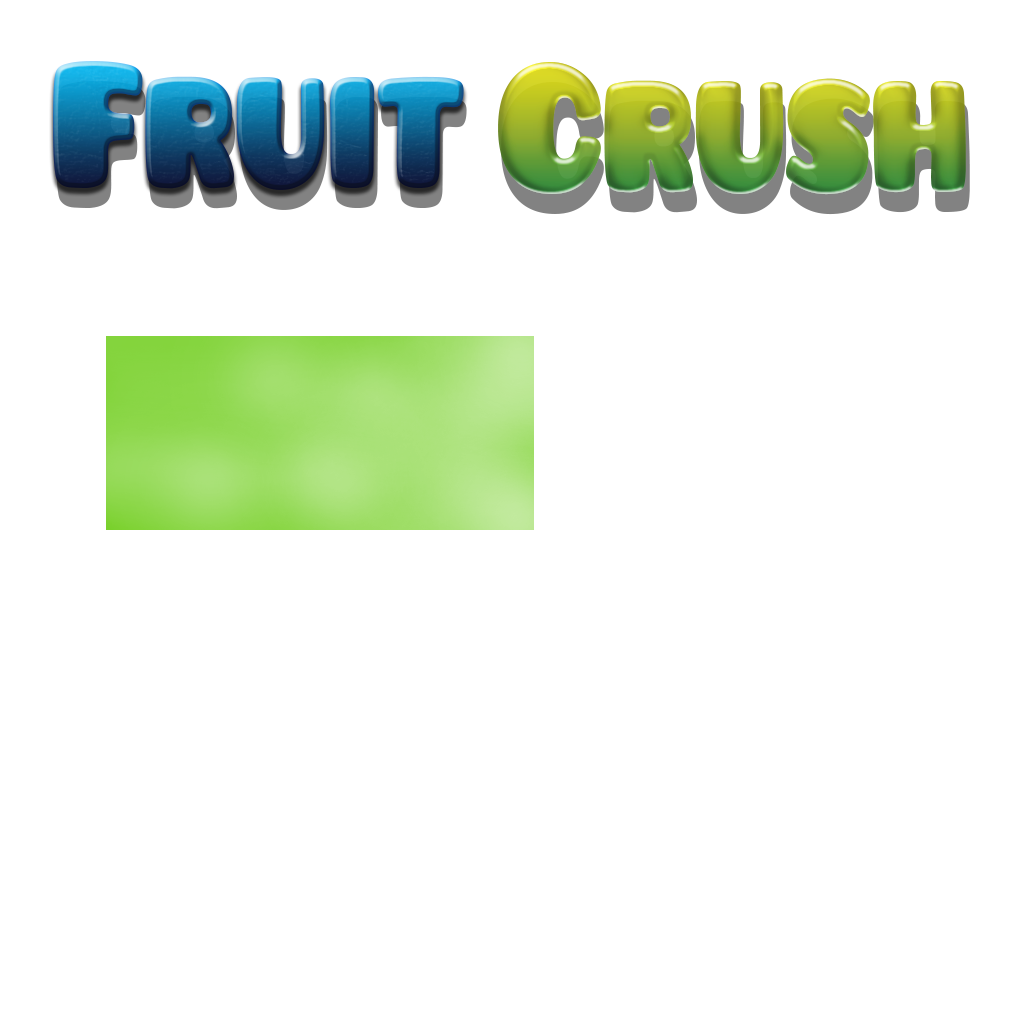
<style>
.page{position:relative;width:1024px;height:1024px;background:#ffffff}
.page>*{position:absolute;margin:0}
.t1{font:196.2px "Pusab";letter-spacing:-0.02em;scale:0.78 1}
</style>
<div class="page">
<p class="t1" style="left:53px;top:61px;width:411px;height:129px">Fruit</p>
<p class="t1" style="left:498px;top:62px;width:468px;height:133px">Crush</p>
<p class="t1" style="left:56px;top:81px;width:411px;height:129px">Fruit</p>
<p class="t1" style="left:501px;top:82px;width:469px;height:133px">Crush</p>
</div>
